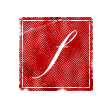
<style>
.page{position:relative;width:112px;height:108px;background:#ffffff}
.page>*{position:absolute;margin:0}
.t1{font:62px "EdwardianScriptITC";color:#ffffff}
</style>
<div class="page">
<p class="t1" style="left:32px;top:30px;width:46px;height:49px">f</p>
</div>
